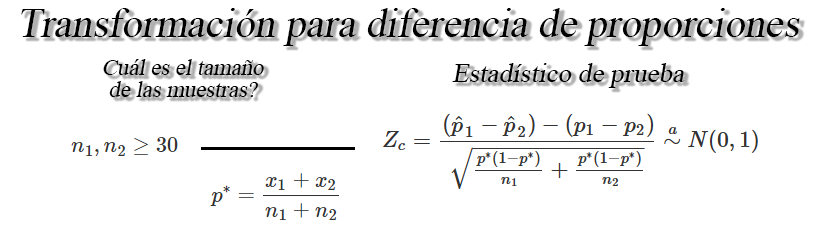
<style>
.page{position:relative;width:821px;height:244px;background:#ffffff}
.page>*{position:absolute;margin:0}
.t1{font:30.5px "TimesNewRomanPSMT";color:#000000;font-style:italic}
.t2{font:22.7px/21.7px "TimesNewRomanPSMT";color:#000000;font-style:italic}
.t3{font:20.4px "TimesNewRomanPSMT";color:#000000;font-style:italic}
</style>
<div class="page">
<p class="t1" style="left:21px;top:8px;width:779px;height:38px">Transformación para diferencia de proporciones</p>
<p class="t2" style="left:103px;top:59px;width:161px;height:38px;text-align:center">Cuál es el tamaño<br>de las muestras?</p>
<p class="t3" style="left:452px;top:63px;width:233px;height:25px">Estadístico de prueba</p>
</div>
